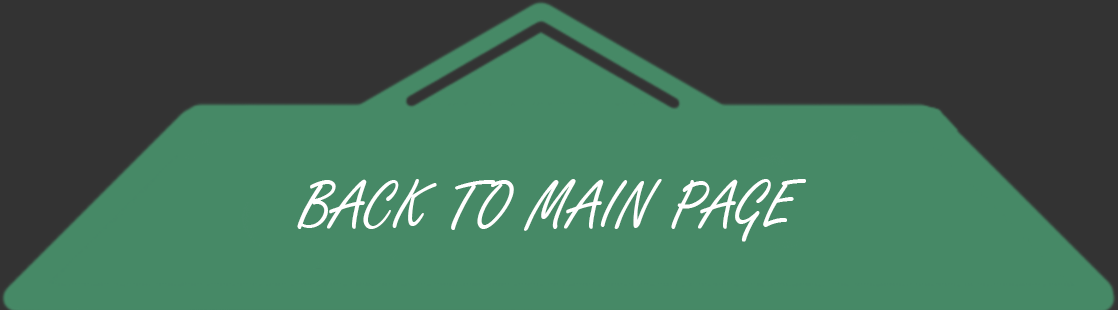
<style>
.page{position:relative;width:1118px;height:310px;background:#468966}
.page>*{position:absolute;margin:0}
.t1{font:72px "FreestyleScript-Regular";color:#ffffff}
</style>
<div class="page">
<p class="t1" style="left:297px;top:179px;width:509px;height:63px">BACK TO MAIN PAGE</p>
</div>
